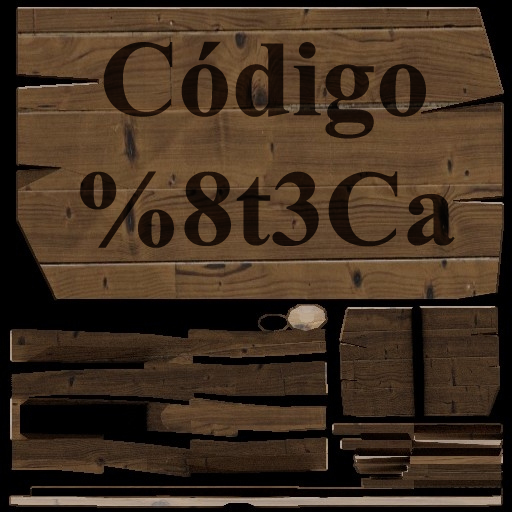
<style>
.page{position:relative;width:512px;height:512px}
.page>*{position:absolute;margin:0}
.t1{font:108px "TimesNewRomanPS-BoldMT";color:#190d07}
</style>
<div class="page">
<p class="t1" style="left:80px;top:41px;width:375px;height:207px;text-align:center">Código<br>%8t3Ca</p>
<p class="t1" style="left:80px;top:41px;width:375px;height:207px;text-align:center">Código<br>%8t3Ca</p>
</div>
